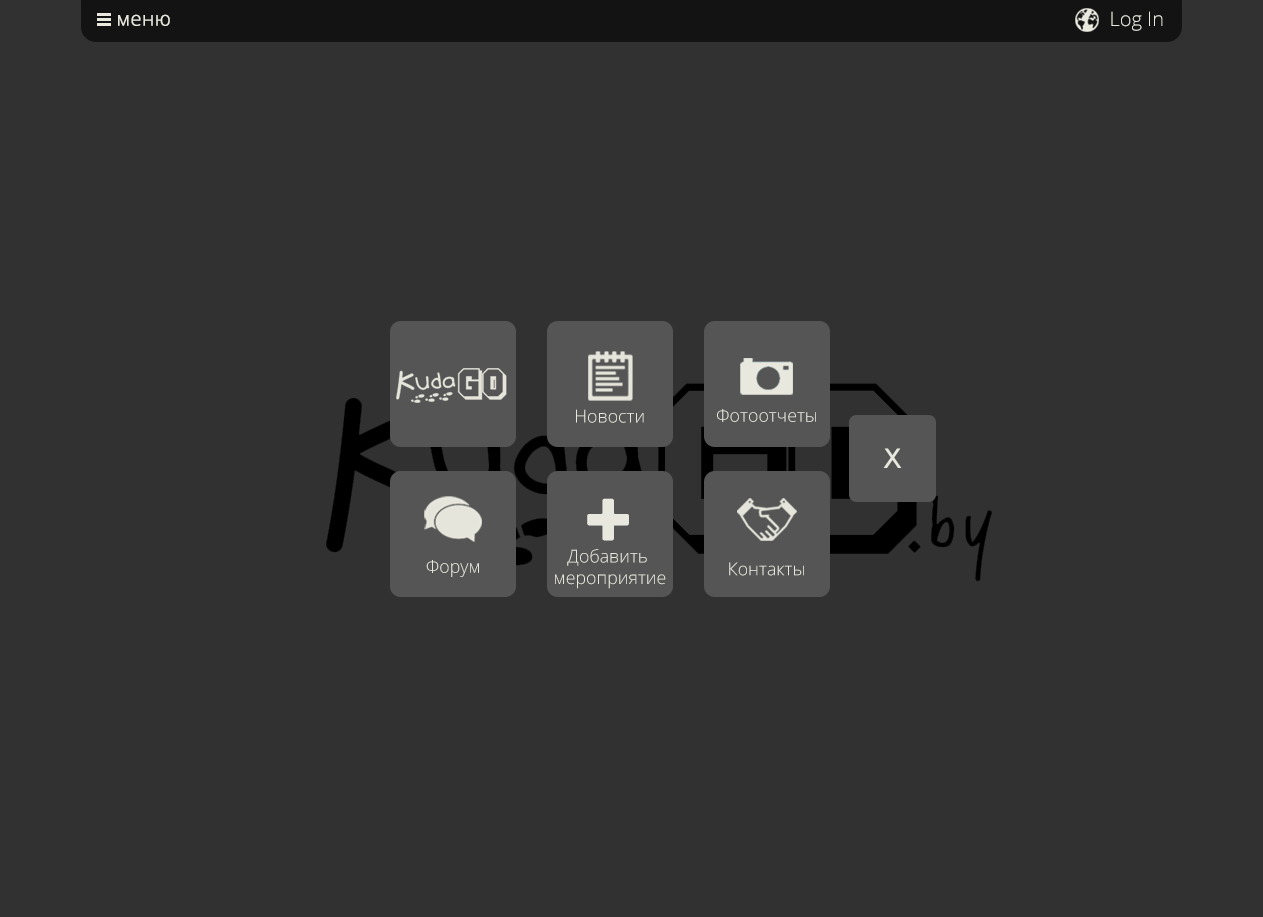
<style>
.page{position:relative;width:1263px;height:917px;background:#313131}
.page>*{position:absolute;margin:0}
.t1{font:20px "OpenSans-Light";color:#e8e8de;font-weight:bold}
.t2{font:20px "OpenSans-Light";color:#e8e8de}
.t3{font:17.8px "OpenSans-Light";color:#e8e8de}
.t4{font:27.1px "ArialMT";color:#e8e8de}
.t5{font:114.1px "Roland";color:#e8e8de;font-weight:bold}
</style>
<div class="page">
<p class="t1" style="left:118px;top:14px;width:52px;height:12px">меню</p>
<p class="t2" style="left:1111px;top:11px;width:52px;height:20px">Log In</p>
<p class="t3" style="left:576px;top:409px;width:68px;height:14px">Новости</p>
<p class="t3" style="left:717px;top:409px;width:99px;height:13px">Фотоотчеты</p>
<p class="t4" style="left:883px;top:448px;width:19px;height:20px">Х</p>
<p class="t5" style="left:587px;top:498px;width:42px;height:43px">+</p>
<p class="t3" style="left:555px;top:549px;width:111px;height:40px;text-align:center">Добавить <br>мероприятие</p>
<p class="t3" style="left:426px;top:560px;width:53px;height:17px">Форум</p>
<p class="t3" style="left:729px;top:562px;width:75px;height:14px">Контакты</p>
</div>
